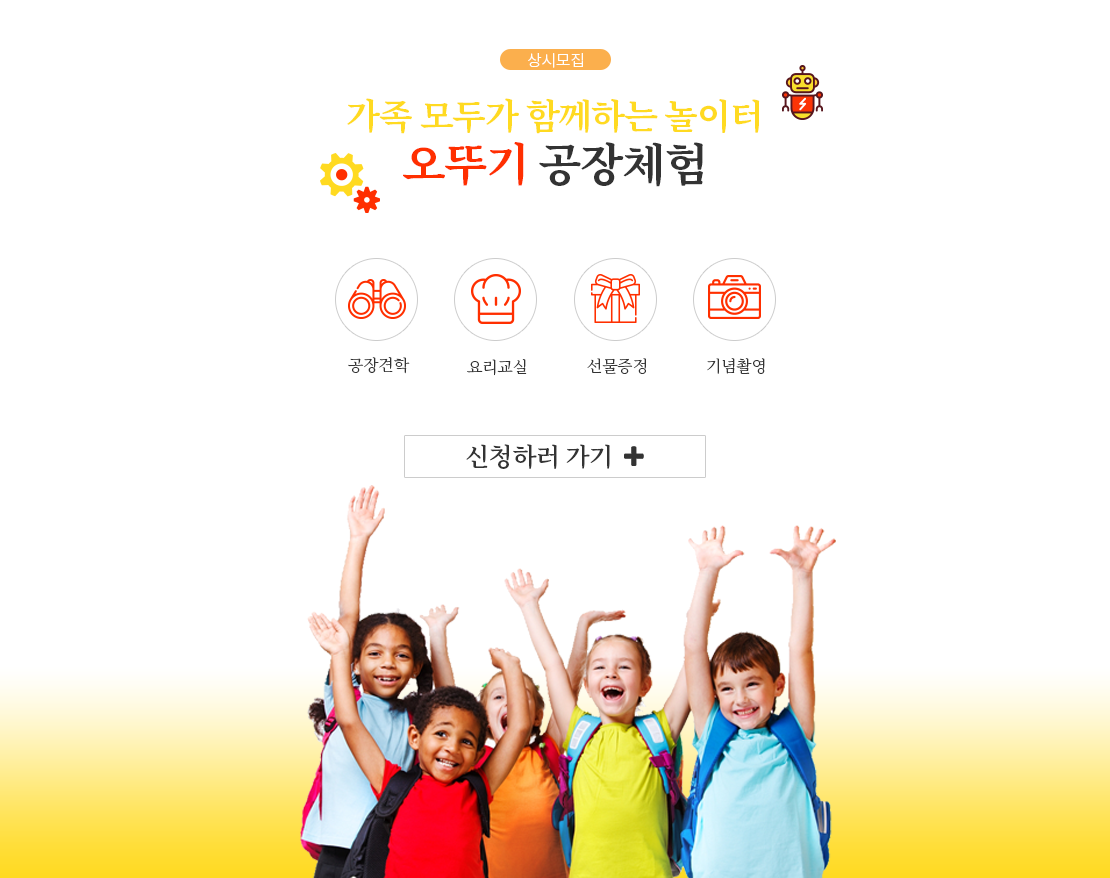
<style>
.page{position:relative;width:1110px;height:878px;background:#ffffff}
.page>*{position:absolute;margin:0}
.t1{font:16px "NotoSansKR-Light";letter-spacing:-0.02em;color:#ffffff}
.t2{font:35px "NotoSerifKR-Bold";letter-spacing:-0.03em;color:#ffda21}
.t3{font:45px "NotoSerifKR-Bold";letter-spacing:-0.03em;color:#333333}
.t4{font:45px "NotoSerifKR-Bold";letter-spacing:-0.03em;color:#ff2f00}
.t5{font:16px "NotoSerifKR-Light";letter-spacing:-0.02em;color:#333333}
.t6{font:25px "NotoSerifKR-SemiBold";letter-spacing:-0.02em;color:#333333}
</style>
<div class="page">
<p class="t1" style="left:528px;top:53px;width:55px;height:15px">상시모집</p>
<p class="t2" style="left:347px;top:98px;width:413px;height:36px">가족 모두가 함께하는 놀이터</p>
<p class="t3" style="left:403px;top:142px;width:300px;height:45px"><span class="t4">오뚜기</span> 공장체험</p>
<p class="t5" style="left:348px;top:357px;width:62px;height:17px">공장견학</p>
<p class="t5" style="left:467px;top:359px;width:60px;height:17px">요리교실</p>
<p class="t5" style="left:587px;top:358px;width:59px;height:16px">선물증정</p>
<p class="t5" style="left:707px;top:358px;width:58px;height:16px">기념촬영</p>
<p class="t6" style="left:466px;top:444px;width:144px;height:25px">신청하러 가기</p>
</div>
